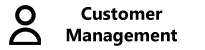
<style>
.page{position:relative;width:205px;height:50px;background:#ffffff}
.page>*{position:absolute;margin:0}
.t1{font:18px "MicrosoftTaiLe-Bold";color:#000000}
</style>
<div class="page">
<p class="t1" style="left:66px;top:7px;width:111px;height:39px;text-align:center">Customer Management</p>
</div>
